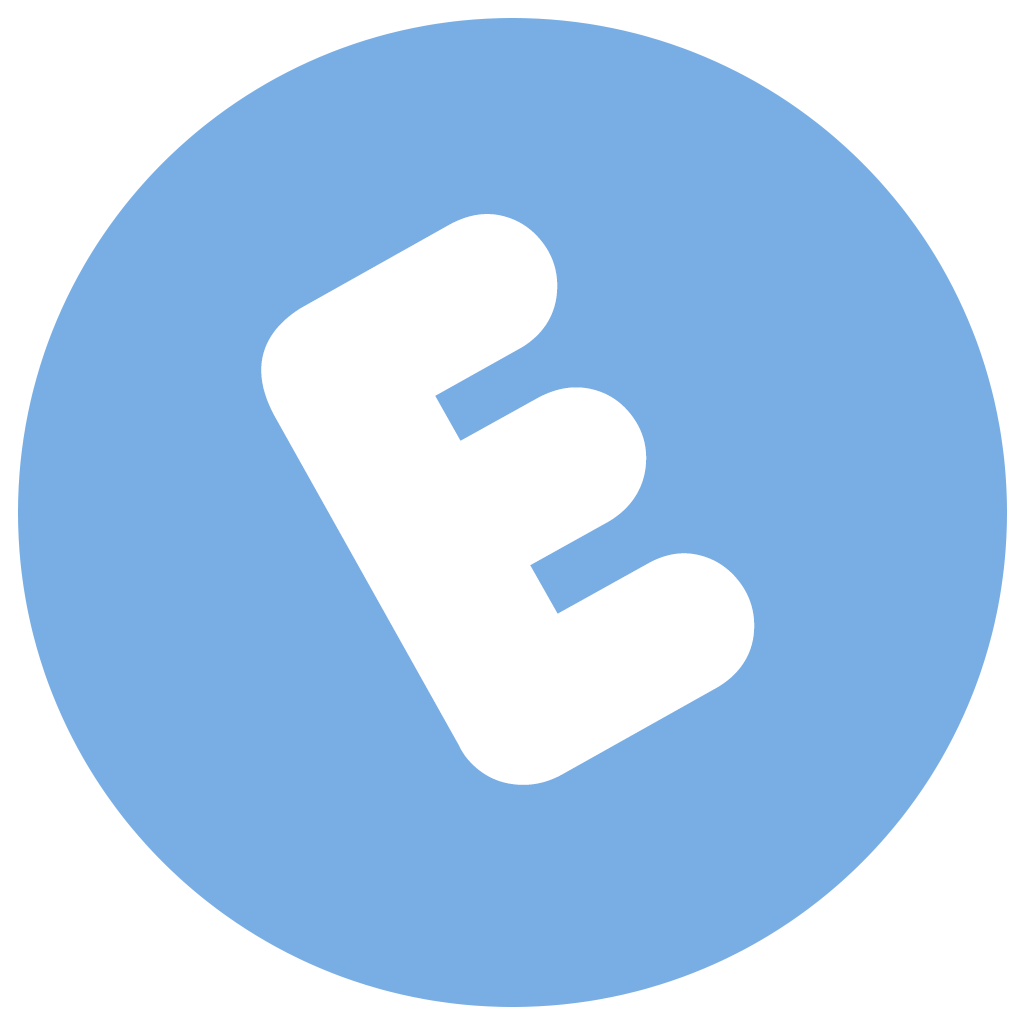
<style>
.page{position:relative;width:1024px;height:1024px;background:#79aee5}
.page>*{position:absolute;margin:0}
.t1{font:683.3px "Porkys";letter-spacing:0.02em;color:#ffffff;font-weight:bold}
</style>
<div class="page">
<p class="t1" style="left:261px;top:214px;width:494px;height:571px;rotate:-40deg">E</p>
</div>
